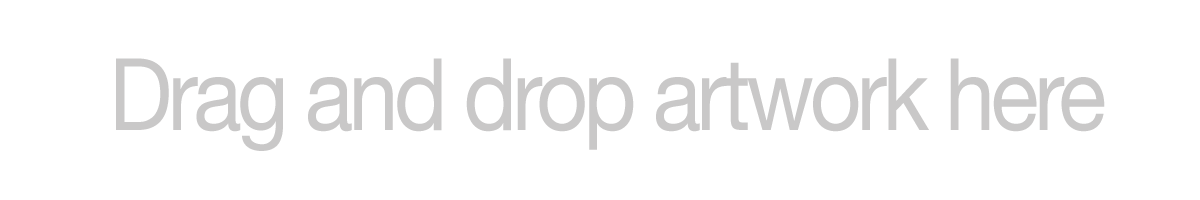
<style>
.page{position:relative;width:1200px;height:200px;background:#ffffff}
.page>*{position:absolute;margin:0}
.t1{font:100px "HelveticaNeue";letter-spacing:-0.05em;color:#c9c8c8;scale:0.9 1}
</style>
<div class="page">
<p class="t1" style="left:116px;top:58px;width:989px;height:93px">Drag and drop artwork here</p>
</div>
